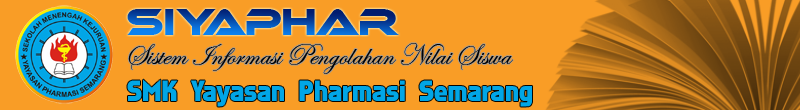
<style>
.page{position:relative;width:800px;height:110px;background:#f99d26}
.page>*{position:absolute;margin:0}
.t1{font:36px "Ethnocentric"}
.t2{font:30px "EdwardianScriptITC";color:#000000}
.t3{font:27px "Faktos";color:#01a6e6}
</style>
<div class="page">
<p class="t1" style="left:127px;top:9px;width:272px;height:26px">siyaphar</p>
<p class="t2" style="left:128px;top:43px;width:385px;height:31px">Sistem Informasi Pengolahan Nilai Siswa</p>
<p class="t3" style="left:127px;top:79px;width:405px;height:28px">SMK Yayasan Pharmasi Semarang</p>
</div>
